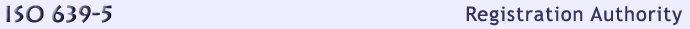
<style>
.page{position:relative;width:690px;height:29px;background:#eeeeff}
.page>*{position:absolute;margin:0}
.t1{font:24px "LeeToscanini5RegularSH";letter-spacing:0.01em}
.t2{font:20px "TrebuchetMS";letter-spacing:0.05em;color:#333366}
</style>
<div class="page">
<p class="t1" style="left:6px;top:5px;width:106px;height:18px">ISO 639-5</p>
<p class="t2" style="left:466px;top:6px;width:216px;height:20px">Registration Authority</p>
</div>
